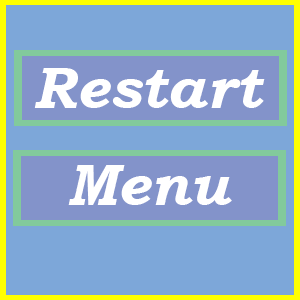
<style>
.page{position:relative;width:300px;height:300px;background:#7da7d9}
.page>*{position:absolute;margin:0}
.t1{font:58.3px "BookmanOldStyle-BoldItalic";color:#ffffff}
</style>
<div class="page">
<p class="t1" style="left:34px;top:68px;width:231px;height:40px">Restart</p>
<p class="t1" style="left:68px;top:165px;width:164px;height:40px">Menu</p>
</div>
